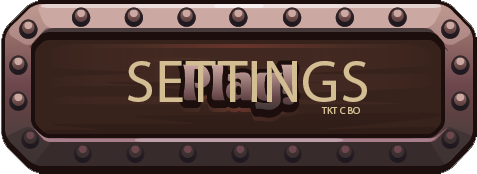
<style>
.page{position:relative;width:477px;height:174px}
.page>*{position:absolute;margin:0}
.t1{font:60px "MyriadPro-Regular";color:#d3bd92}
.t2{font:10px "MyriadPro-Regular";color:#d3bd92}
</style>
<div class="page">
<p class="t1" style="left:128px;top:61px;width:239px;height:41px">SETTINGS</p>
<p class="t2" style="left:321px;top:107px;width:39px;height:7px">TKT C BO</p>
</div>
